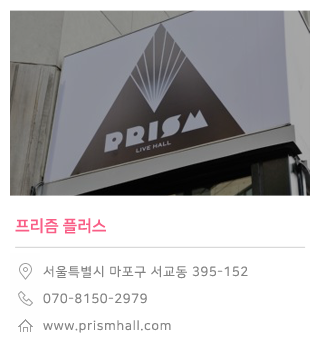
<style>
.page{position:relative;width:320px;height:360px;background:#ffffff}
.page>*{position:absolute;margin:0}
.t1{font:16px "NanumSquareB";color:#f95e86}
.t2{font:13px/27px "NanumSquareRoundR";letter-spacing:0.05em;color:#848484}
</style>
<div class="page">
<p class="t1" style="left:15px;top:218px;width:91px;height:16px">프리즘 플러스</p>
<p class="t2" style="left:43px;top:265px;width:205px;height:68px">서울특별시 마포구 서교동 395-152<br>070-8150-2979<br>www.prismhall.com</p>
</div>
